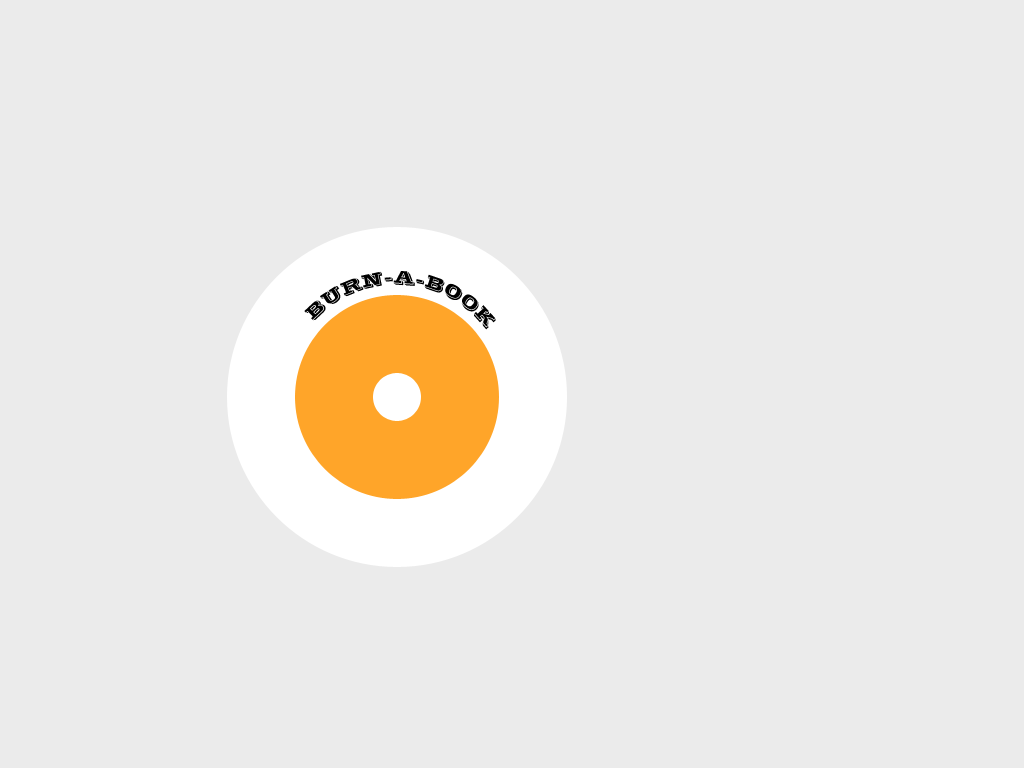
<style>
.page{position:relative;width:1024px;height:768px;background:#ebebeb}
.page>*{position:absolute;margin:0}
.t1{font:18px "VinetaBT-Regular";color:#000000;text-transform:uppercase}
</style>
<div class="page">
<p class="t1" style="left:304px;top:271px;width:192px;height:59px;rotate:-132deg">burn-a-book</p>
</div>
